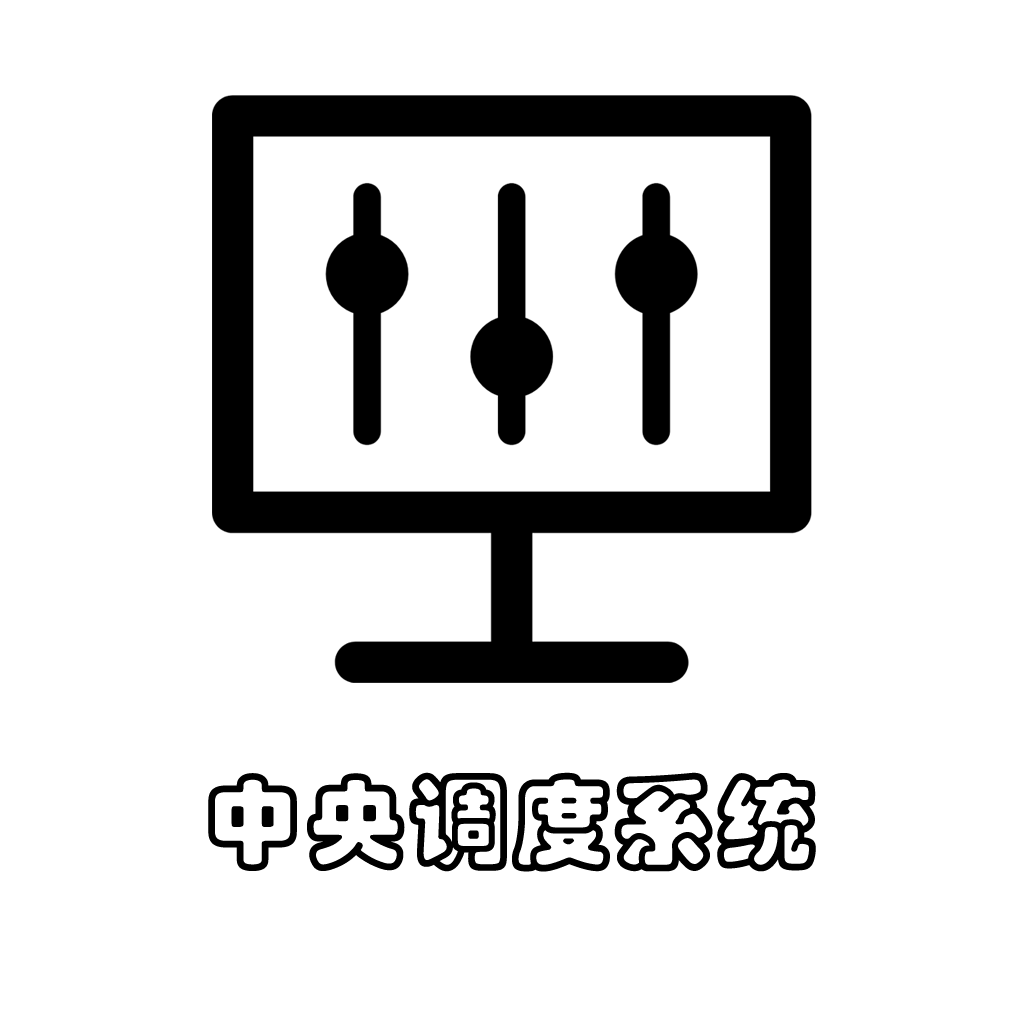
<style>
.page{position:relative;width:1024px;height:1024px;background:#ffffff}
.page>*{position:absolute;margin:0}
.t1{font:100px "STCaiyun";color:#000000;font-weight:bold}
</style>
<div class="page">
<p class="t1" style="left:208px;top:772px;width:608px;height:100px">中央调度系统</p>
</div>
